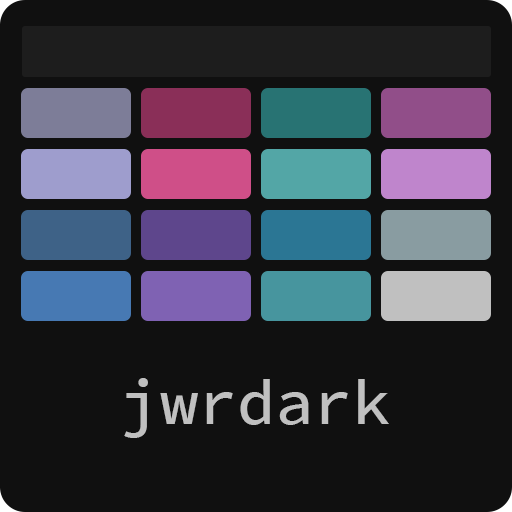
<style>
.page{position:relative;width:512px;height:512px;background:#101010}
.page>*{position:absolute;margin:0}
.t1{font:64px "SourceCodePro-Medium";color:#c0c0c0}
</style>
<div class="page">
<p class="t1" style="left:124px;top:378px;width:265px;height:60px">jwrdark</p>
</div>
